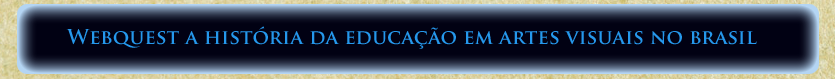
<style>
.page{position:relative;width:835px;height:79px;background:#010113}
.page>*{position:absolute;margin:0}
.t1{font:20px "TrajanPro-Bold";color:#2598ec}
</style>
<div class="page">
<p class="t1" style="left:66px;top:26px;width:691px;height:23px">Webquest a história da educação em artes visuais no brasil</p>
</div>
